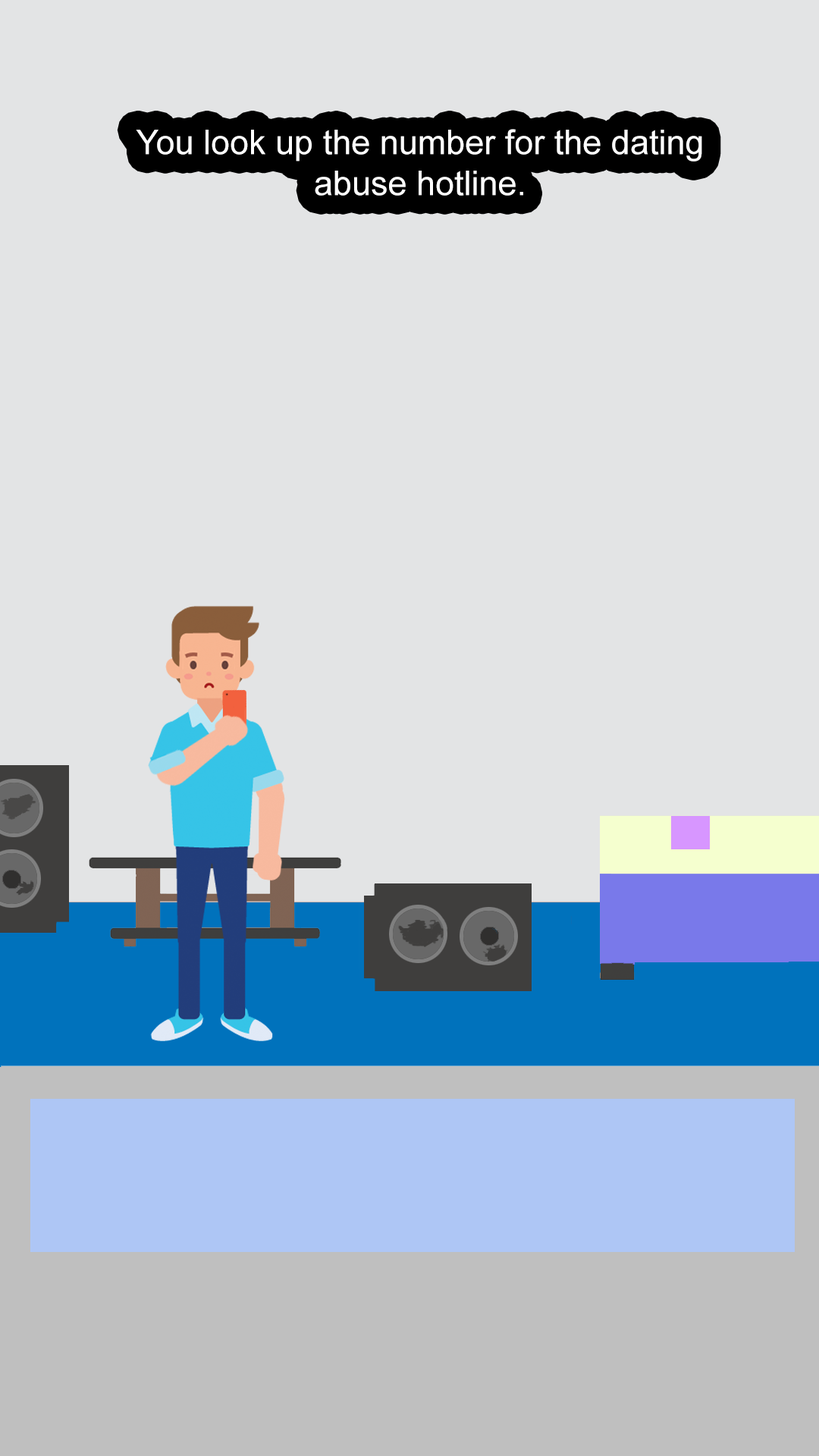
<style>
.page{position:relative;width:819px;height:1456px;background:#e3e4e5}
.page>*{position:absolute;margin:0}
.t1{font:34.1px "ArialMT";color:#ffffff}
</style>
<div class="page">
<p class="t1" style="left:136px;top:129px;width:566px;height:67px;text-align:center">You look up the number for the dating abuse hotline.</p>
</div>
